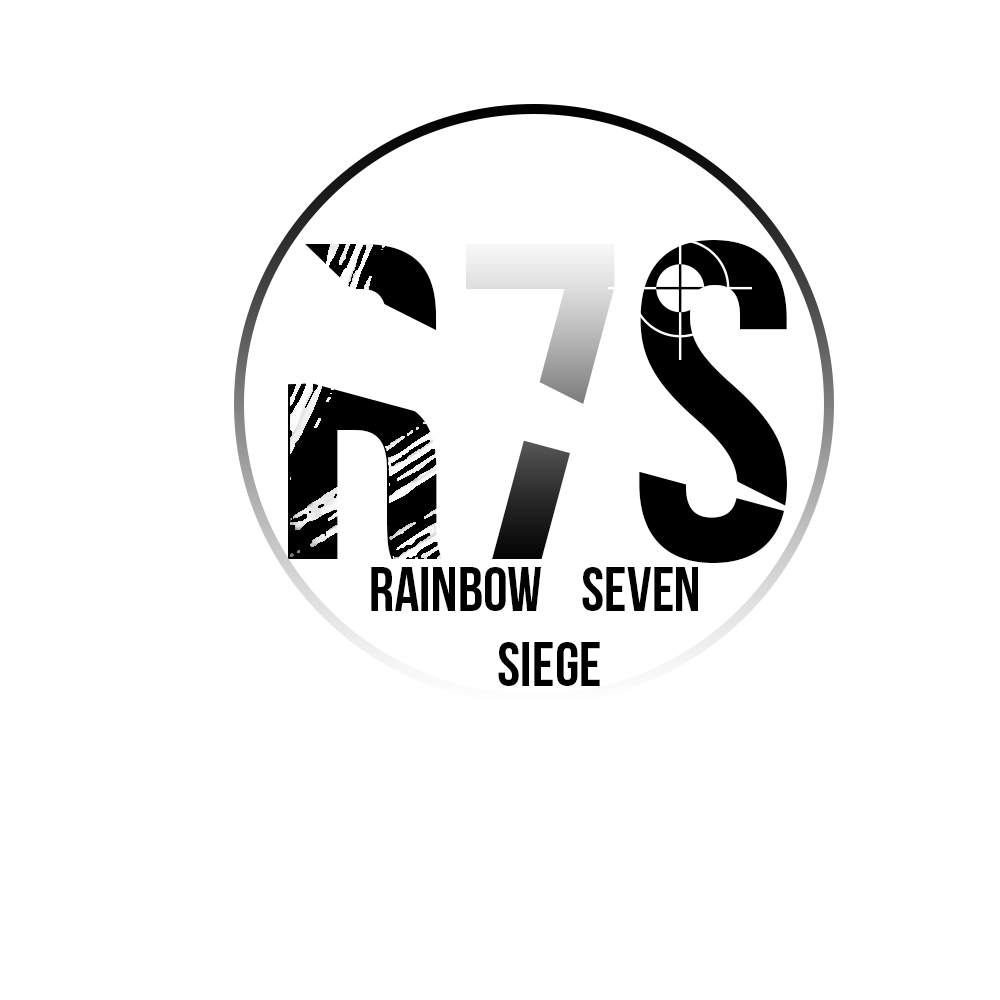
<style>
.page{position:relative;width:1000px;height:1000px;background:#ffffff}
.page>*{position:absolute;margin:0}
.t1{font:450px "BebasNeue"}
.t2{font:62px "BebasNeue";color:#000000}
</style>
<div class="page">
<p class="t1" style="left:288px;top:240px;width:499px;height:323px">R7S</p>
<p class="t2" style="left:371px;top:567px;width:327px;height:119px;text-align:center">Rainbow    seven<br>   siege</p>
</div>
